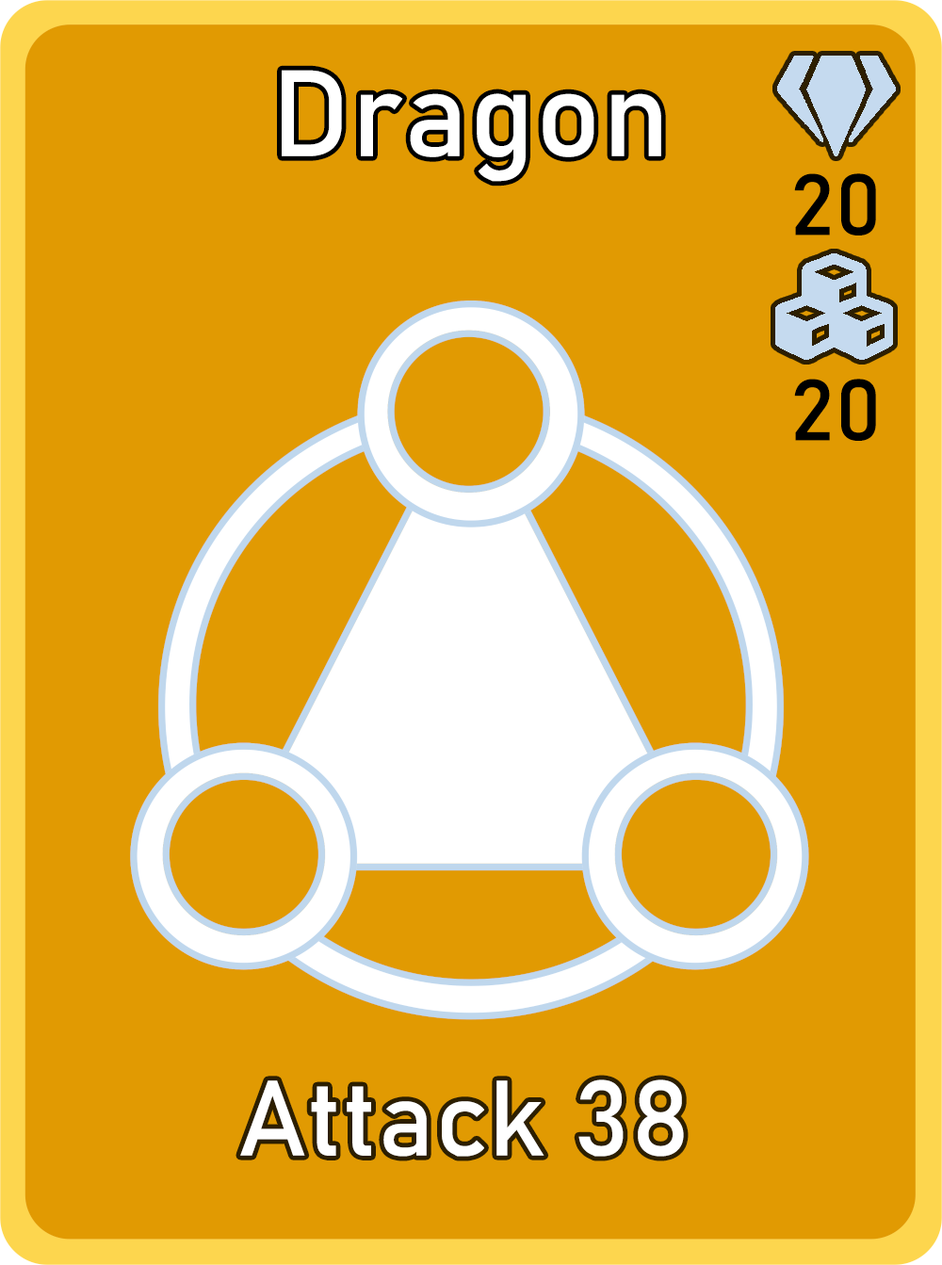
<style>
.page{position:relative;width:942px;height:1265px;background:#e19a02}
.page>*{position:absolute;margin:0}
.t1{font:120.6px "Bahnschrift";letter-spacing:0.01em;color:#ffffff}
.t2{font:85px "Bahnschrift";letter-spacing:0.01em;color:#000000}
.t3{font:105.1px "Bahnschrift";letter-spacing:0.01em;color:#ffffff}
</style>
<div class="page">
<p class="t1" style="left:282px;top:70px;width:379px;height:112px">Dragon</p>
<p class="t2" style="left:794px;top:173px;width:82px;height:63px">20</p>
<p class="t2" style="left:794px;top:379px;width:82px;height:62px">20</p>
<p class="t3" style="left:240px;top:1080px;width:444px;height:77px">Attack 38</p>
</div>
